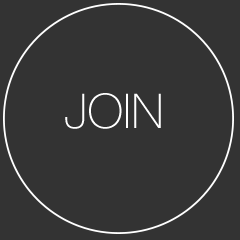
<style>
.page{position:relative;width:240px;height:240px;background:#333333}
.page>*{position:absolute;margin:0}
.t1{font:48px "HelveticaNeue-Thin";color:#ffffff}
</style>
<div class="page">
<p class="t1" style="left:65px;top:93px;width:96px;height:36px">JOIN</p>
</div>
